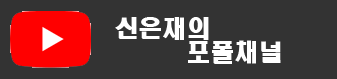
<style>
.page{position:relative;width:337px;height:79px;background:#333333}
.page>*{position:absolute;margin:0}
.t1{font:24px "HeadlineR-HM";color:#ffffff}
</style>
<div class="page">
<p class="t1" style="left:115px;top:17px;width:94px;height:23px">신은재의</p>
<p class="t1" style="left:188px;top:40px;width:93px;height:24px">포폴채널</p>
</div>
